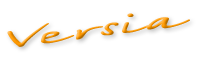
<style>
.page{position:relative;width:200px;height:70px;background:#ffffff}
.page>*{position:absolute;margin:0}
.t1{font:30.5px "BirchCTT";font-weight:bold;scale:2.09 1}
</style>
<div class="page">
<p class="t1" style="left:7px;top:13px;width:183px;height:34px;rotate:-7deg">Versia</p>
</div>
